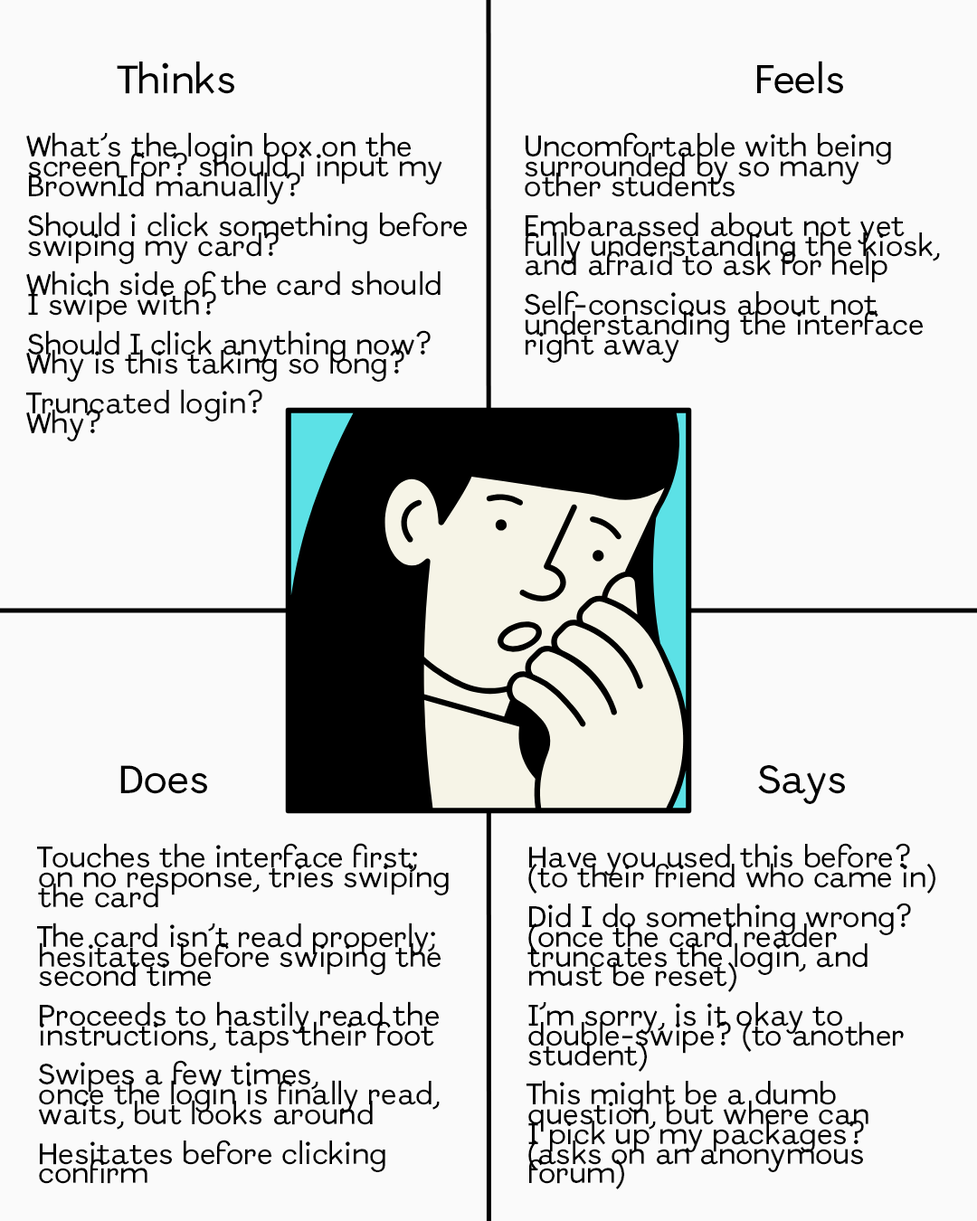
<style>
.page{position:relative;width:977px;height:1221px;background:#fafafa}
.page>*{position:absolute;margin:0}
.t1{font:39.8px "Abordage-Regular";color:#000000}
.t2{font:29.6px/19.7px "Abordage-Regular";color:#000000}
</style>
<div class="page">
<p class="t1" style="left:117px;top:61px;width:117px;height:33px">Thinks</p>
<p class="t1" style="left:757px;top:61px;width:86px;height:33px">Feels</p>
<p class="t2" style="left:26px;top:132px;width:441px;height:309px">What’s the login box on the <br>screen for? should i input my <br>BrownId manually?<br><br>Should i click something before <br>swiping my card? <br><br>Which side of the card should<br>I swipe with? <br><br>Should I click anything now? <br>Why is this taking so long?<br><br>Truncated login?<br>Why?</p>
<p class="t2" style="left:524px;top:132px;width:416px;height:231px">Uncomfortable with being <br>surrounded by so many <br>other students<br><br>Embarassed about not yet <br>fully understanding the kiosk, <br>and afraid to ask for help<br><br>Self-conscious about not <br>understanding the interface<br>right away</p>
<p class="t1" style="left:120px;top:765px;width:87px;height:29px">Does</p>
<p class="t1" style="left:758px;top:765px;width:87px;height:39px">Says</p>
<p class="t2" style="left:37px;top:843px;width:412px;height:341px">Touches the interface first; <br>on no response, tries swiping<br>the card<br><br>The card isn’t read properly;<br>hesitates before swiping the <br>second time <br><br>Proceeds to hastily read the<br>instructions, taps their foot<br> <br>Swipes a few times,<br>once the login is finally read, <br>waits, but looks around<br><br>Hesitates before clicking <br>confirm</p>
<p class="t2" style="left:526px;top:843px;width:409px;height:346px">Have you used this before?<br>(to their friend who came in)<br><br>Did I do something wrong?<br>(once the card reader <br>truncates the login, and <br>must be reset)<br><br>I’m sorry, is it okay to <br>double-swipe? (to another<br>student)<br><br>This might be a dumb <br>question, but where can <br>I pick up my packages?<br>(asks on an anonymous <br>forum)</p>
</div>
